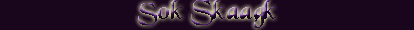
<style>
.page{position:relative;width:414px;height:30px;background:#19051c}
.page>*{position:absolute;margin:0}
.t1{font:29px "BlackChancery"}
.t2{font:24.8px "BlackChancery"}
</style>
<div class="page">
<p class="t1" style="left:138px;top:0px;width:138px;height:28px"><span class="t2">               </span><span class="t2">S</span>ok Skaagk</p>
</div>
